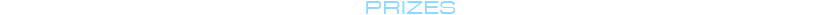
<style>
.page{position:relative;width:820px;height:15px;background:#ffffff}
.page>*{position:absolute;margin:0}
.t1{font:20px "MicrogrammaD-MediExte";letter-spacing:0.075em;color:#8dd9ff;text-transform:uppercase}
</style>
<div class="page">
<p class="t1" style="left:366px;top:1px;width:90px;height:13px">PRIZES</p>
</div>
